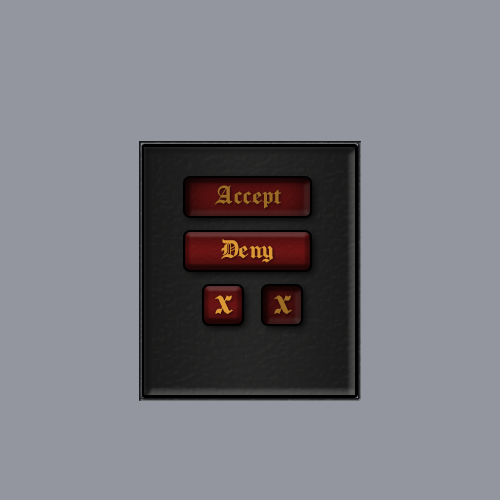
<style>
.page{position:relative;width:500px;height:500px;background:#93969f}
.page>*{position:absolute;margin:0}
.t1{font:24px "Chomsky";color:#9c6c26}
.t2{font:24px "Chomsky";color:#dc9836}
.t3{font:36px "Chomsky";color:#dc9836}
.t4{font:36px "Chomsky";color:#9c6c26}
</style>
<div class="page">
<p class="t1" style="left:215px;top:185px;width:67px;height:24px">Accept</p>
<p class="t2" style="left:221px;top:239px;width:52px;height:24px">Deny</p>
<p class="t3" style="left:215px;top:295px;width:18px;height:19px">x</p>
<p class="t4" style="left:274px;top:295px;width:18px;height:19px">x</p>
</div>
